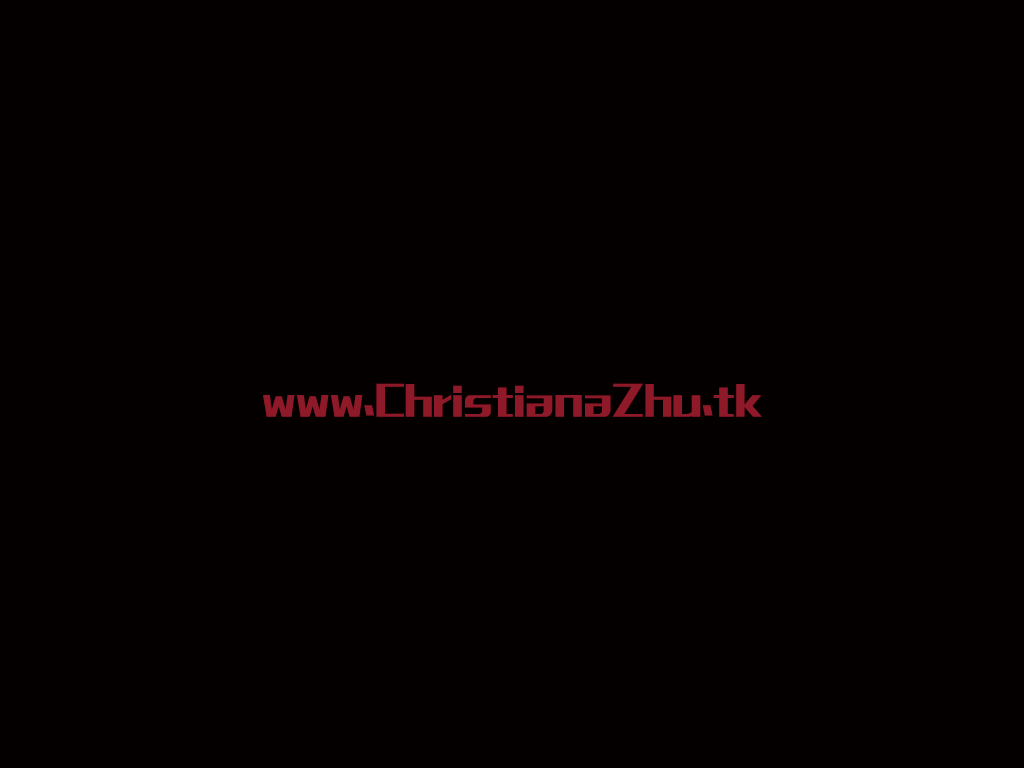
<style>
.page{position:relative;width:1024px;height:768px;background:#040000}
.page>*{position:absolute;margin:0}
.t1{font:36px "MFLiHei_Noncommercial-Regular";color:#8e1929}
</style>
<div class="page">
<p class="t1" style="left:263px;top:383px;width:499px;height:34px">www.ChristianaZhu.tk</p>
</div>
